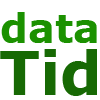
<style>
.page{position:relative;width:100px;height:100px;background:#ffffff}
.page>*{position:absolute;margin:0}
.t1{font:40px "Verdana-Bold";color:#1b9200}
.t2{font:60px "Verdana-Bold";color:#176904}
</style>
<div class="page">
<p class="t1" style="left:1px;top:12px;width:96px;height:31px">data</p>
<p class="t2" style="left:0px;top:49px;width:97px;height:47px">Tid</p>
</div>
